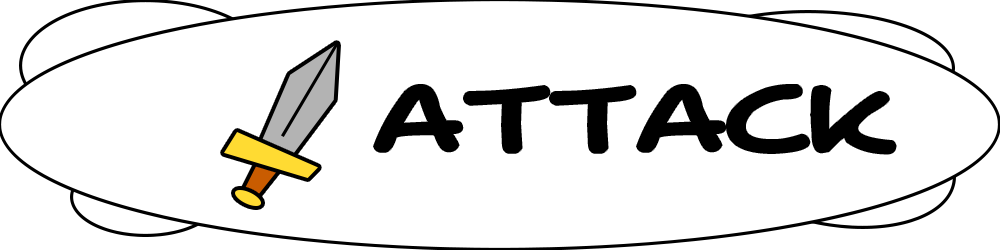
<style>
.page{position:relative;width:1000px;height:250px;background:#ffffff}
.page>*{position:absolute;margin:0}
.t1{font:60px "HeyGorgeous";color:#000000;scale:1.28 1}
</style>
<div class="page">
<p class="t1" style="left:374px;top:85px;width:522px;height:69px">ATTACK</p>
</div>
